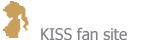
<style>
.page{position:relative;width:150px;height:40px;background:#ffffff}
.page>*{position:absolute;margin:0}
.t1{font:16px "Tahoma";color:#808185;scale:0.97 1}
</style>
<div class="page">
<p class="t1" style="left:41px;top:27px;width:86px;height:14px">KISS fan site</p>
</div>
